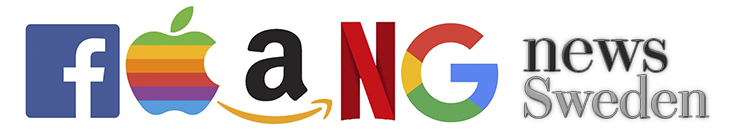
<style>
.page{position:relative;width:745px;height:135px;background:#ffffff}
.page>*{position:absolute;margin:0}
.t1{font:68.1px "BrunelPoster-Roman";color:#292929}
.t2{font:55.9px "BrunelPoster-Roman";color:#a3a3a3}
</style>
<div class="page">
<p class="t1" style="left:523px;top:39px;width:144px;height:33px">news</p>
<p class="t2" style="left:525px;top:75px;width:184px;height:43px">Sweden</p>
</div>
